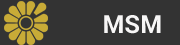
<style>
.page{position:relative;width:180px;height:45px;background:#333333}
.page>*{position:absolute;margin:0}
.t1{font:25px "Roboto-Bold";color:#f7f6f6}
</style>
<div class="page">
<p class="t1" style="left:104px;top:15px;width:57px;height:19px">MSM</p>
</div>
